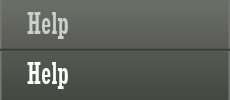
<style>
.page{position:relative;width:230px;height:100px}
.page>*{position:absolute;margin:0}
.t1{font:30px "Rockwell-Condensed";color:#cccecb}
.t2{font:30px "Rockwell-Condensed";color:#fefffe}
</style>
<div class="page">
<p class="t1" style="left:27px;top:12px;width:41px;height:27px">Help</p>
<p class="t2" style="left:27px;top:62px;width:41px;height:27px">Help</p>
</div>
